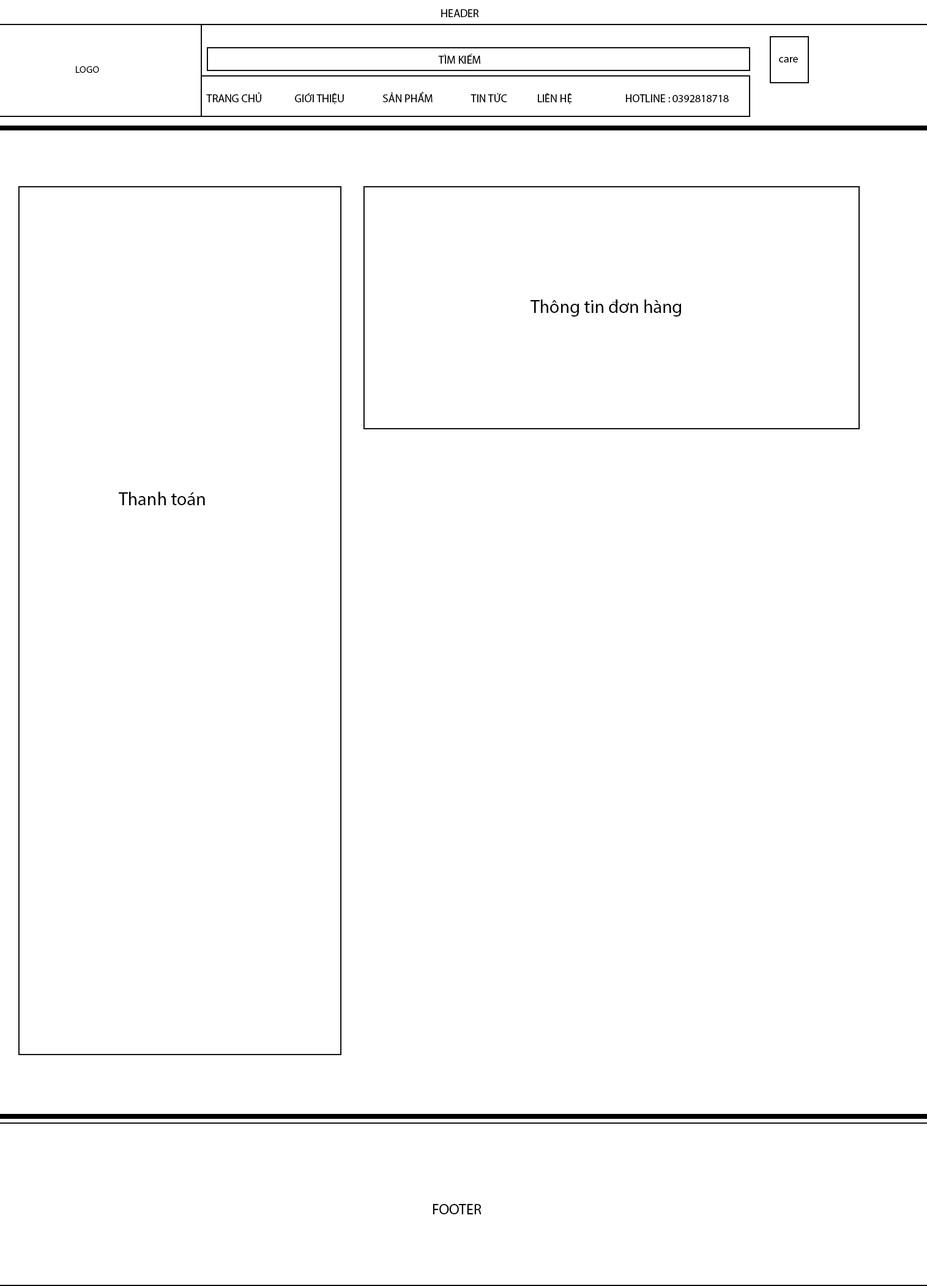
<style>
.page{position:relative;width:927px;height:1286px;background:#ffffff}
.page>*{position:absolute;margin:0}
.t1{font:11px "MyriadPro-Regular";color:#000000}
.t2{font:9.8px "MyriadPro-Regular";color:#000000}
.t3{font:18.4px "MyriadPro-Regular";color:#000000}
.t4{font:14.7px "MyriadPro-Regular";color:#000000;text-transform:uppercase}
</style>
<div class="page">
<p class="t1" style="left:441px;top:9px;width:38px;height:8px">HEADER</p>
<p class="t1" style="left:438px;top:53px;width:43px;height:11px">TÌM KIẾM</p>
<p class="t1" style="left:779px;top:57px;width:19px;height:5px">care</p>
<p class="t2" style="left:76px;top:66px;width:23px;height:7px">LOGO</p>
<p class="t1" style="left:206px;top:92px;width:523px;height:12px">TRANG CHỦ   GIỚI THIỆU  SẢN PHẨM   TIN TỨC  LIÊN HỆ   HOTLINE : 0392818718</p>
<p class="t3" style="left:531px;top:299px;width:150px;height:18px">Thông tin đơn hàng</p>
<p class="t3" style="left:119px;top:492px;width:86px;height:13px">Thanh toán</p>
<p class="t4" style="left:433px;top:1204px;width:49px;height:10px">footer</p>
</div>
